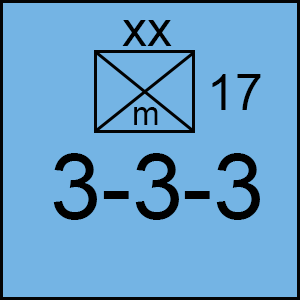
<style>
.page{position:relative;width:300px;height:300px;background:#74b4e4}
.page>*{position:absolute;margin:0}
.t1{font:50px "ArialMT";color:#000000}
.t2{font:33.3px "ArialMT";color:#000000}
.t3{font:91.7px "ArialMT";color:#000000}
</style>
<div class="page">
<p class="t1" style="left:122px;top:20px;width:50px;height:26px">xx</p>
<p class="t1" style="left:212px;top:74px;width:49px;height:36px">17</p>
<p class="t2" style="left:134px;top:107px;width:24px;height:18px">m</p>
<p class="t3" style="left:53px;top:153px;width:207px;height:67px">3-3-3</p>
</div>
